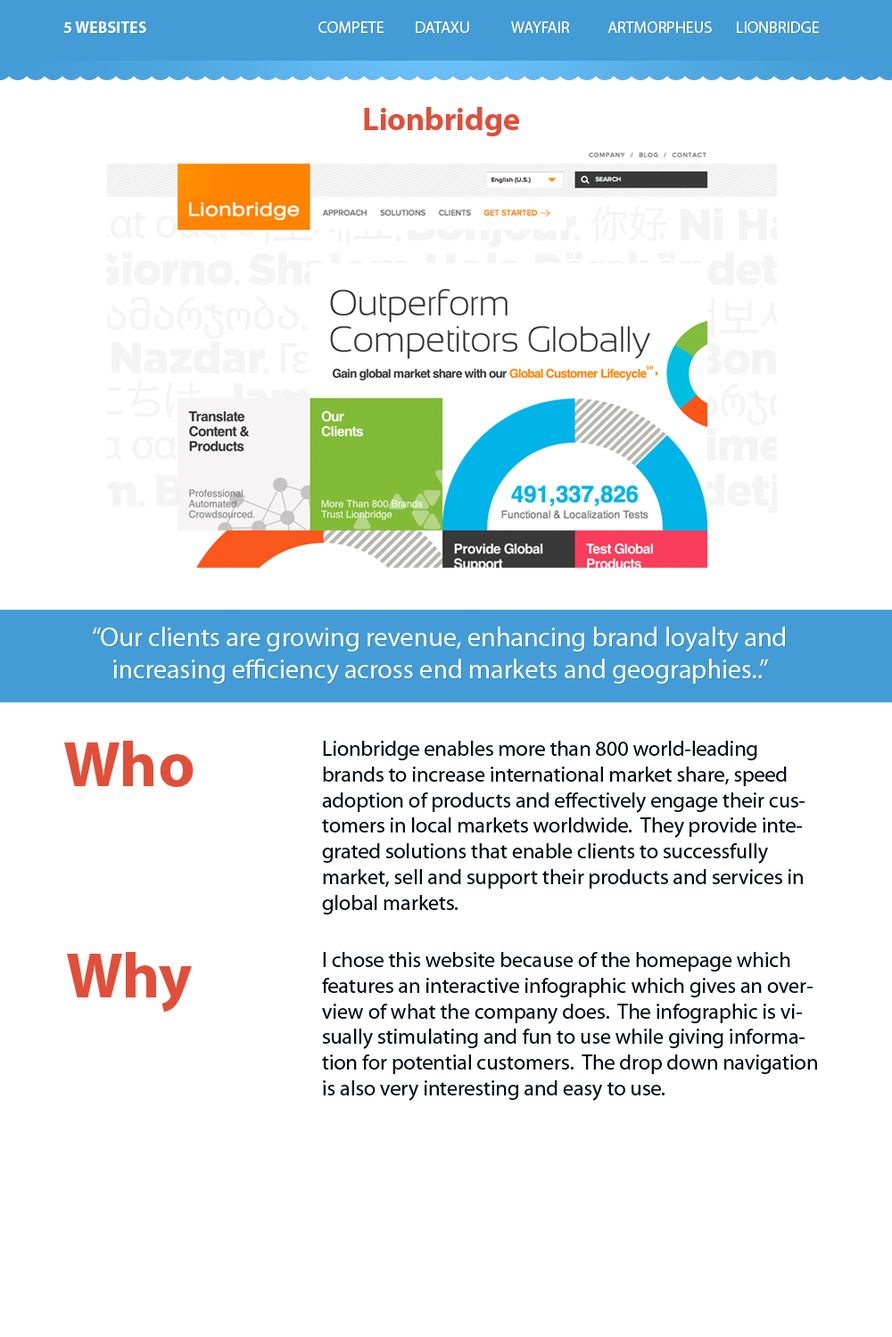
<style>
.page{position:relative;width:892px;height:1337px;background:#ffffff}
.page>*{position:absolute;margin:0}
.t1{font:16px "MyriadPro-Bold";color:#ffffff}
.t2{font:16px "MyriadPro-Regular";color:#ffffff}
.t3{font:32.1px "MyriadPro-Bold";color:#e04f3a}
.t4{font:26.7px "MyriadPro-Regular";color:#ffffff}
.t5{font:64.2px "MyriadPro-Bold";color:#e04f3a}
.t6{font:21.4px "MyriadPro-Regular";color:#000d15}
</style>
<div class="page">
<p class="t1" style="left:63px;top:21px;width:83px;height:12px">5 WEBSITES</p>
<p class="t2" style="left:318px;top:21px;width:501px;height:12px">COMPETE DATAXU  WAYFAIR  ARTMORPHEUS LIONBRIDGE</p>
<p class="t3" style="left:364px;top:107px;width:155px;height:29px">Lionbridge</p>
<p class="t4" style="left:93px;top:627px;width:692px;height:58px;text-align:center">“Our clients are growing revenue, enhancing brand loyalty and<br>increasing efficiency across end markets and geographies..”</p>
<p class="t5" style="left:64px;top:741px;width:129px;height:46px">Who</p>
<p class="t6" style="left:322px;top:741px;width:483px;height:174px">Lionbridge enables more than 800 world-leading brands to increase international market share, speed adoption of products and effectively engage their customers in local markets worldwide.  They provide integrated solutions that enable clients to successfully market, sell and support their products and services in global markets.</p>
<p class="t5" style="left:67px;top:952px;width:125px;height:61px">Why</p>
<p class="t6" style="left:322px;top:952px;width:495px;height:149px">I chose this website because of the homepage which features an interactive infographic which gives an overview of what the company does.  The infographic is visually stimulating and fun to use while giving information for potential customers.  The drop down navigation is also very interesting and easy to use.</p>
</div>
